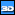
<style>
.page{position:relative;width:15px;height:15px;background:#3399ff}
.page>*{position:absolute;margin:0}
.t1{font:7px "EthnocentricRg-Regular";letter-spacing:-0.035em;color:#fefefe}
</style>
<div class="page">
<p class="t1" style="left:1px;top:6px;width:13px;height:5px">3D</p>
</div>
